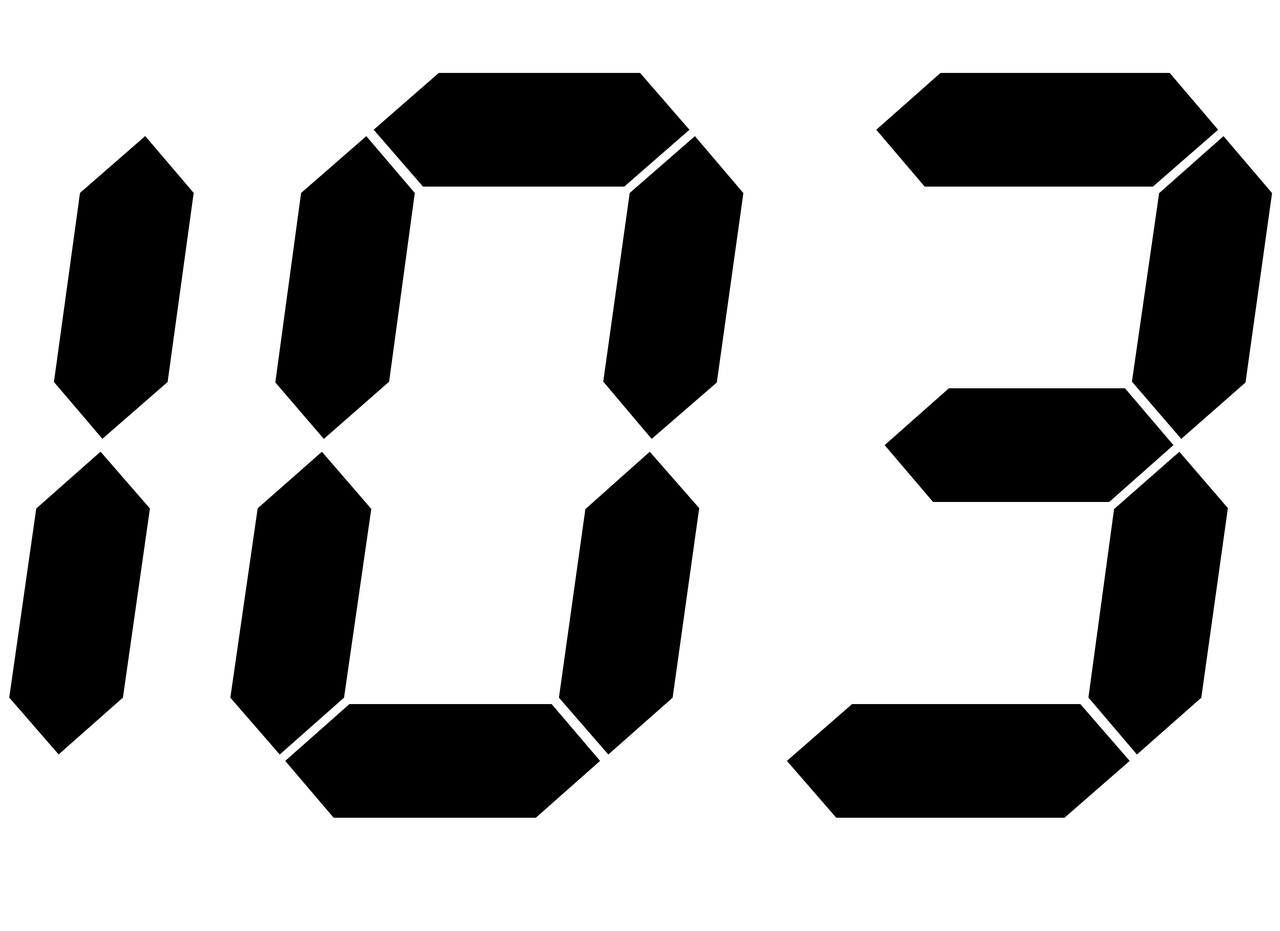
<style>
.page{position:relative;width:1280px;height:931px;background:#ffffff}
.page>*{position:absolute;margin:0}
.t1{font:931.2px "MouseLEDU";letter-spacing:0.05em;color:#000000}
</style>
<div class="page">
<p class="t1" style="left:9px;top:73px;width:1264px;height:745px">103</p>
</div>
